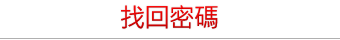
<style>
.page{position:relative;width:340px;height:40px;background:#ffffff}
.page>*{position:absolute;margin:0}
.t1{font:26px "MicrosoftJhengHeiRegular";letter-spacing:-0.05em}
</style>
<div class="page">
<p class="t1" style="left:121px;top:5px;width:97px;height:24px">找回密碼</p>
</div>
